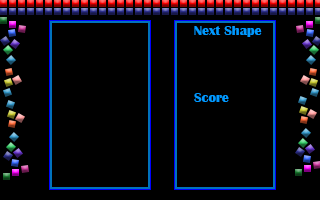
<style>
.page{position:relative;width:320px;height:200px;background:#000000}
.page>*{position:absolute;margin:0}
.t1{font:13.9px "BritannicBold";color:#0099ff}
</style>
<div class="page">
<p class="t1" style="left:194px;top:26px;width:68px;height:11px">Next Shape</p>
<p class="t1" style="left:194px;top:93px;width:35px;height:9px">Score</p>
</div>
